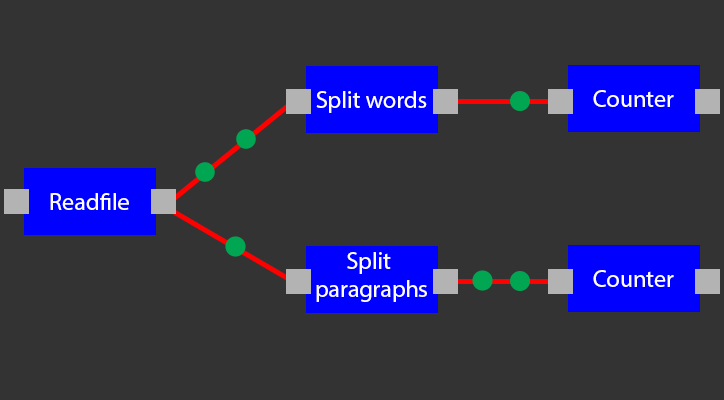
<style>
.page{position:relative;width:724px;height:400px;background:#333333}
.page>*{position:absolute;margin:0}
.t1{font:24px "MyriadPro-Regular";color:#ffffff}
</style>
<div class="page">
<p class="t1" style="left:316px;top:91px;width:111px;height:22px">Split words</p>
<p class="t1" style="left:593px;top:90px;width:81px;height:17px">Counter</p>
<p class="t1" style="left:50px;top:193px;width:79px;height:17px">Readfile</p>
<p class="t1" style="left:316px;top:252px;width:111px;height:50px;text-align:center">Split <br>paragraphs</p>
<p class="t1" style="left:593px;top:270px;width:81px;height:17px">Counter</p>
</div>
